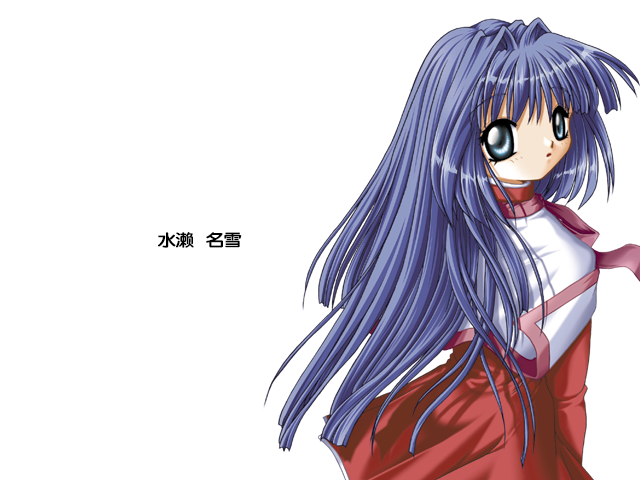
<style>
.page{position:relative;width:640px;height:480px;background:#ffffff}
.page>*{position:absolute;margin:0}
.t1{font:17px "FZY4K--GBK1-0";letter-spacing:-0.08em;color:#000000;scale:1.14 1}
</style>
<div class="page">
<p class="t1" style="left:158px;top:232px;width:84px;height:16px">水濑   名雪</p>
</div>
